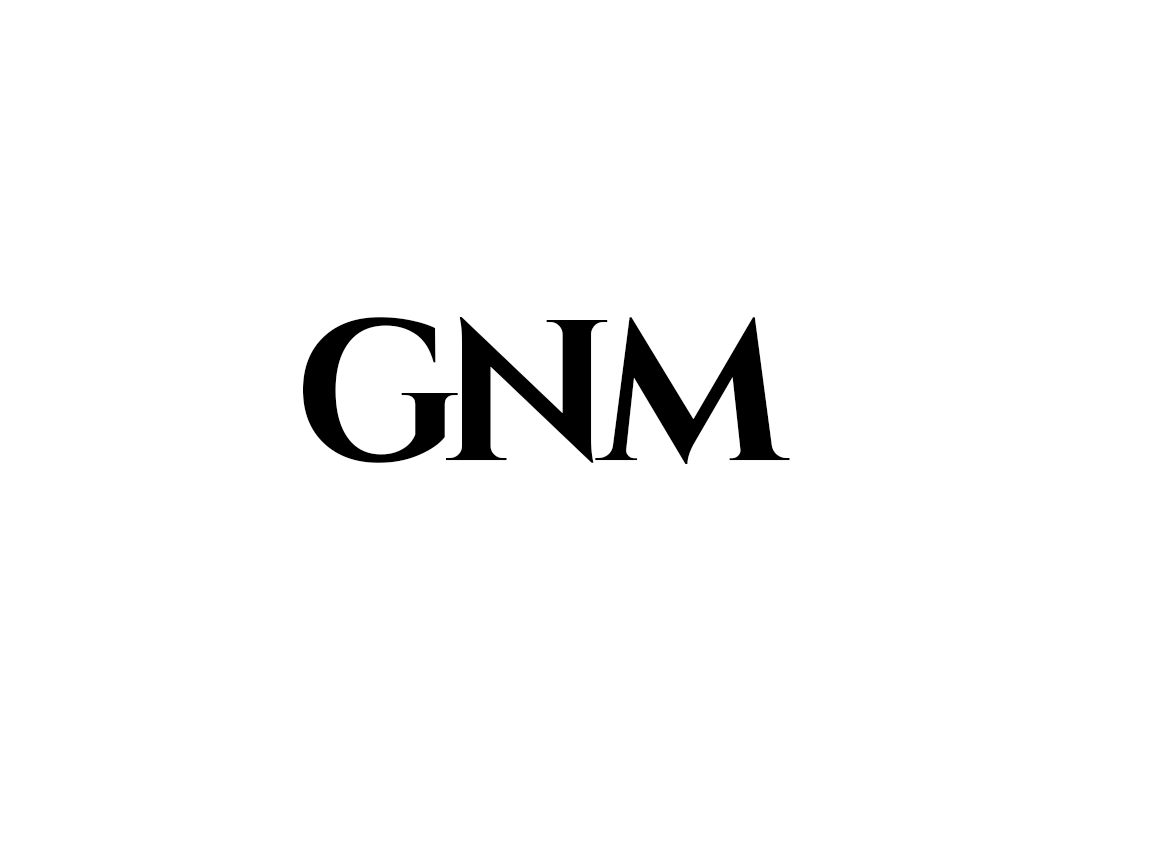
<style>
.page{position:relative;width:1152px;height:864px;background:#ffffff}
.page>*{position:absolute;margin:0}
.t1{font:200px "Cinzel-Bold";letter-spacing:-0.08em;color:#000000}
</style>
<div class="page">
<p class="t1" style="left:303px;top:317px;width:487px;height:147px">GNM</p>
</div>
